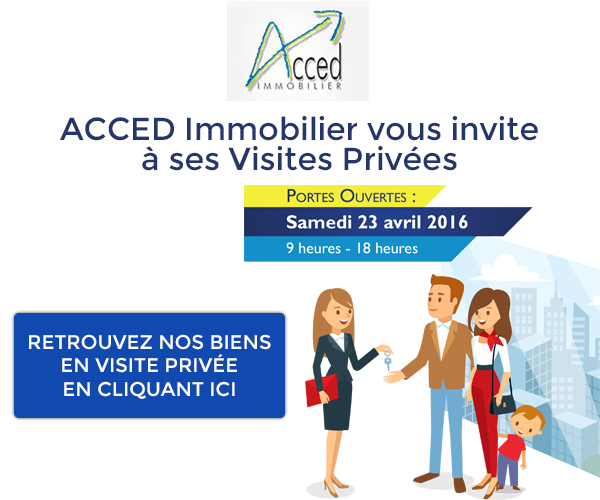
<style>
.page{position:relative;width:600px;height:500px;background:#ffffff}
.page>*{position:absolute;margin:0}
.t1{font:31.7px/30px "Montserrat-Regular";color:#25366c}
.t2{font:19.7px "Montserrat-Regular";color:#ffffff;text-transform:uppercase}
</style>
<div class="page">
<p class="t1" style="left:60px;top:116px;width:478px;height:55px;text-align:center">ACCED Immobilier vous invite<br>à ses Visites Privées</p>
<p class="t2" style="left:29px;top:334px;width:242px;height:65px;text-align:center">Retrouvez nos biens <br>en visite privée <br>en cliquant ici</p>
</div>
